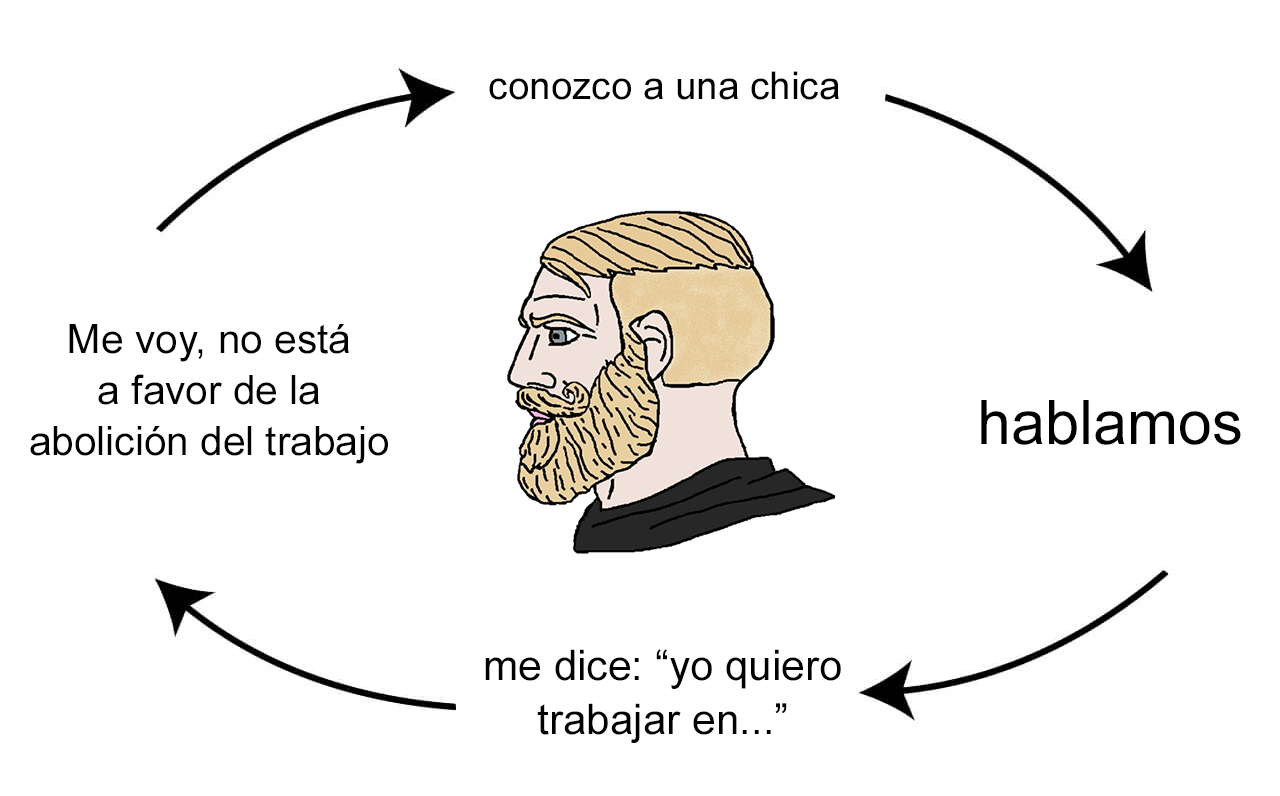
<style>
.page{position:relative;width:1280px;height:796px;background:#ffffff}
.page>*{position:absolute;margin:0}
.t1{font:38.6px "ArialMT";color:#000000}
.t2{font:40.6px "ArialMT";color:#000000}
.t3{font:61.4px "ArialMT";color:#000000}
.t4{font:42.3px "ArialMT";color:#000000}
</style>
<div class="page">
<p class="t1" style="left:489px;top:71px;width:350px;height:29px">conozco a una chica</p>
<p class="t2" style="left:30px;top:324px;width:358px;height:140px;text-align:center">Me voy, no está<br>a favor de la<br>abolición del trabajo</p>
<p class="t3" style="left:981px;top:400px;width:260px;height:45px">hablamos</p>
<p class="t4" style="left:485px;top:649px;width:356px;height:94px;text-align:center">me dice: “yo quiero<br>trabajar en...”</p>
</div>
